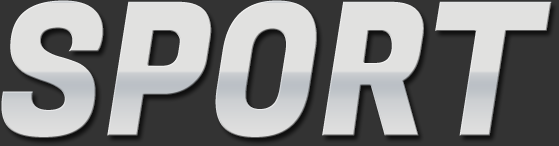
<style>
.page{position:relative;width:559px;height:146px;background:#333333}
.page>*{position:absolute;margin:0}
.t1{font:185.2px "FugazOne-Regular";color:#dfdfdf;scale:0.89 1}
</style>
<div class="page">
<p class="t1" style="left:1px;top:0px;width:551px;height:138px">SPORT</p>
</div>
